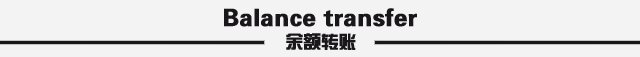
<style>
.page{position:relative;width:640px;height:57px;background:#f3f3f3}
.page>*{position:absolute;margin:0}
.t1{font:24px "FZZYJW--GB1-0";color:#1a171b;font-weight:bold}
.t2{font:18px "FZZYJW--GB1-0";letter-spacing:-0.05em;color:#1a171b;font-weight:bold}
</style>
<div class="page">
<p class="t1" style="left:224px;top:8px;width:193px;height:19px">Balance transfer</p>
<p class="t2" style="left:286px;top:33px;width:70px;height:17px">余额转账</p>
</div>
